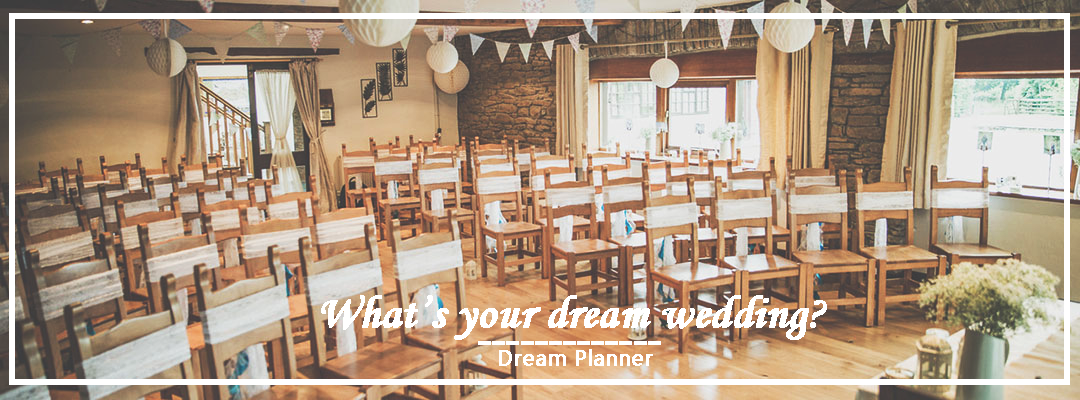
<style>
.page{position:relative;width:1080px;height:400px}
.page>*{position:absolute;margin:0}
.t1{font:46px "MonotypeCorsiva";color:#ffffff;font-weight:bold}
.t2{font:22px "Ebrima";color:#ffffff;font-weight:bold}
</style>
<div class="page">
<p class="t1" style="left:321px;top:295px;width:506px;height:45px">What’s your dream wedding?</p>
<p class="t1" style="left:478px;top:341px;width:183px;height:4px">-------------</p>
<p class="t2" style="left:499px;top:349px;width:154px;height:17px">Dream Planner</p>
</div>
